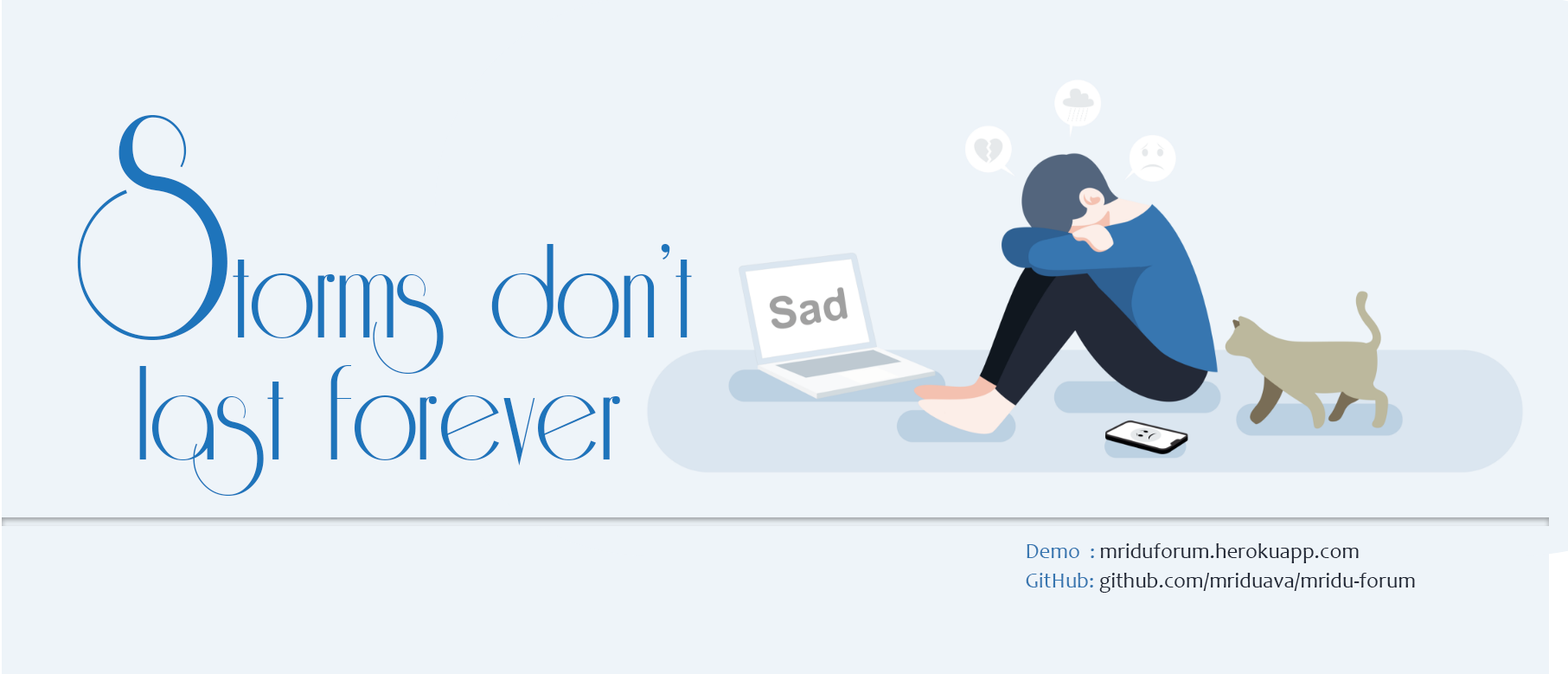
<style>
.page{position:relative;width:1568px;height:674px;background:#eef4f9}
.page>*{position:absolute;margin:0}
.t1{font:152.4px/121.9px "Riesling";color:#1e74bb;scale:0.94 1}
.t2{font:360.4px/121.9px "Riesling";color:#1e74bb;scale:0.94 1}
.t3{font:21.6px/28.8px "Candara";color:#232937}
.t4{font:21.6px/28.8px "Candara";color:#3776b0}
</style>
<div class="page">
<p class="t1" style="left:77px;top:115px;width:615px;height:381px"><span class="t2">S</span>torms don’t<br>  last forever</p>
<p class="t3" style="left:1026px;top:543px;width:389px;height:49px"><span class="t4">Demo  : </span>mriduforum.herokuapp.com<br><span class="t4">GitHub: </span>github.com/mriduava/mridu-forum</p>
</div>
